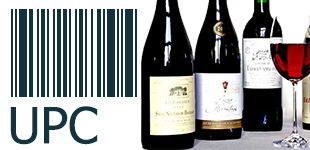
<style>
.page{position:relative;width:310px;height:150px;background:#ffffff}
.page>*{position:absolute;margin:0}
.t1{font:50px "Tahoma";color:#14343b}
</style>
<div class="page">
<p class="t1" style="left:10px;top:106px;width:88px;height:39px">UPC</p>
</div>
